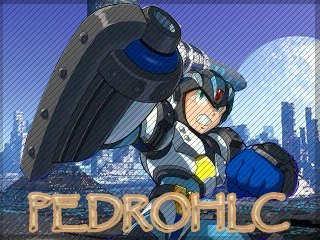
<style>
.page{position:relative;width:320px;height:240px}
.page>*{position:absolute;margin:0}
.t1{font:35.9px "Papyrus-Regular";text-transform:uppercase}
</style>
<div class="page">
<p class="t1" style="left:30px;top:194px;width:257px;height:36px">PedroHLC</p>
</div>
